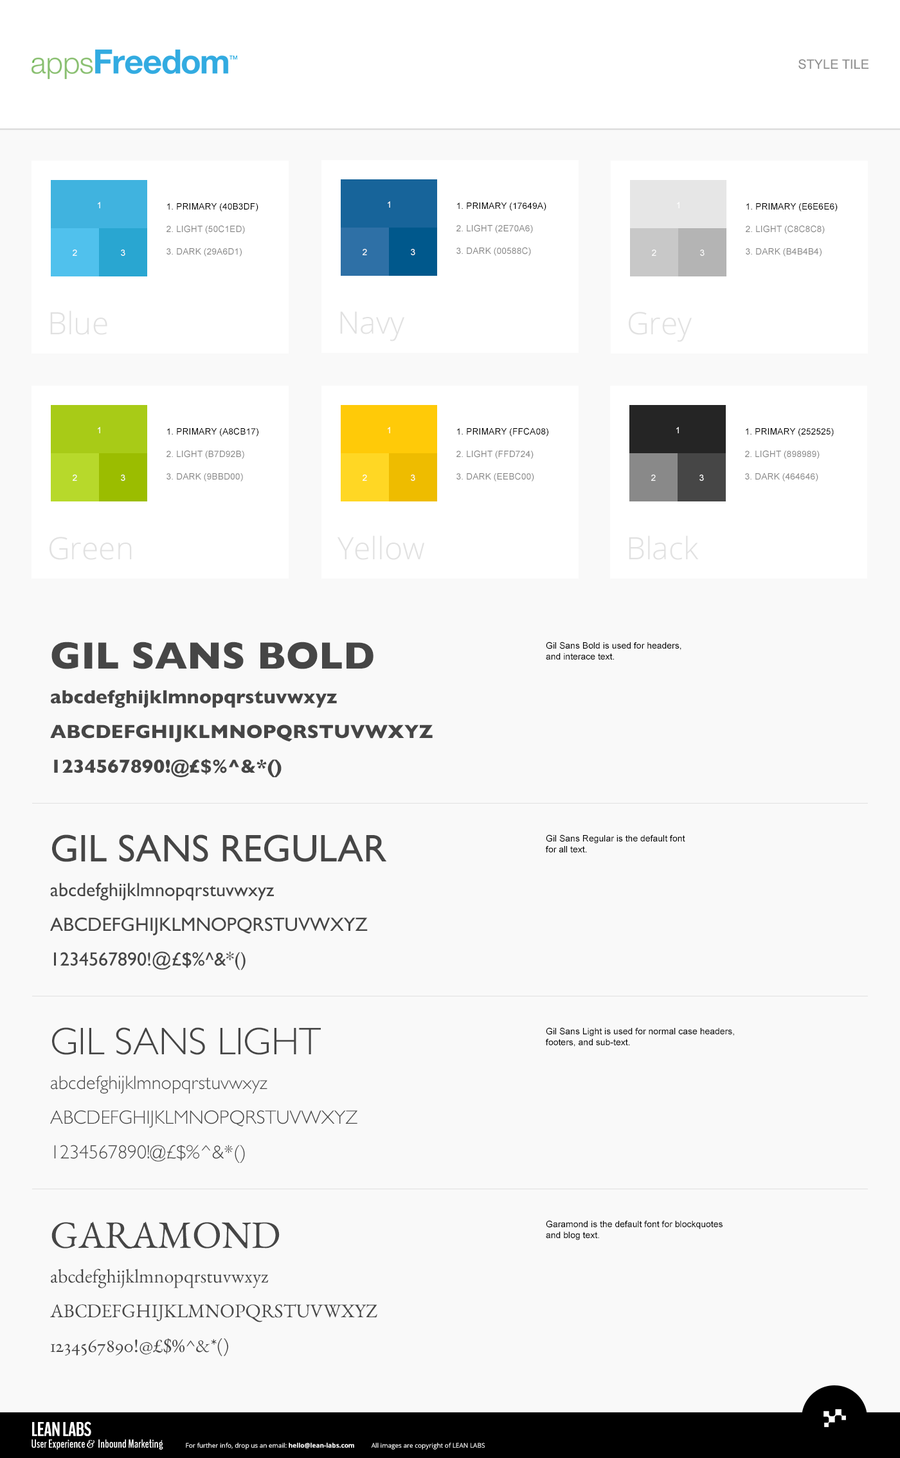
<style>
.page{position:relative;width:900px;height:1458px;background:#f9f9f9}
.page>*{position:absolute;margin:0}
.t1{font:12.9px "ArialMT";color:#8d8d8d;text-transform:uppercase}
.t2{font:9px "ArialMT";color:#ffffff;text-transform:uppercase}
.t3{font:9px "ArialMT";color:#898989;text-transform:uppercase}
.t4{font:9px "ArialMT";color:#000000;text-transform:uppercase}
.t5{font:30.9px "OpenSans-Light";color:#e1e1e1}
.t6{font:19.3px "GillSans-Bold";color:#464646;text-transform:uppercase}
.t7{font:38.6px "GillSans-Bold";color:#464646;text-transform:uppercase}
.t8{font:19.3px "GillSans-Bold";color:#464646}
.t9{font:9px "ArialMT";color:#000000}
.t10{font:19.3px "GillSans";color:#464646;text-transform:uppercase}
.t11{font:38.6px "GillSans";color:#464646;text-transform:uppercase}
.t12{font:19.3px "GillSans";color:#464646}
.t13{font:19.3px "GillSans-Light";color:#464646;text-transform:uppercase}
.t14{font:38.6px "GillSans-Light";color:#464646;text-transform:uppercase}
.t15{font:19.3px "GillSans-Light";color:#464646}
.t16{font:19.3px "EBGaramond";color:#464646;text-transform:uppercase}
.t17{font:38.6px "EBGaramond";color:#464646;text-transform:uppercase}
.t18{font:19.3px "EBGaramond";color:#464646}
.t19{font:19.3px "BenchNine-Bold";letter-spacing:-0.04em;color:#ffffff;text-transform:uppercase;font-weight:bold}
.t20{font:11.6px "BenchNine-Bold";color:#ffffff}
.t21{font:11.6px "Ovo";color:#ffffff}
.t22{font:6.4px "OpenSans";color:#ffffff}
.t23{font:6.4px "OpenSans-Bold";color:#ffffff}
</style>
<div class="page">
<p class="t1" style="left:798px;top:59px;width:71px;height:10px">STYLE TILE</p>
<p class="t2" style="left:98px;top:202px;width:2px;height:6px">1</p>
<p class="t3" style="left:166px;top:203px;width:92px;height:53px"><span class="t4">1. primary (40b3df)<br></span>2. light (50c1ed)<br>3. dark (29a6d1)</p>
<p class="t2" style="left:388px;top:201px;width:2px;height:7px">1</p>
<p class="t3" style="left:456px;top:203px;width:90px;height:53px"><span class="t4">1. primary (17649a)<br></span>2. light (2e70a6)<br>3. dark (00588c)</p>
<p class="t2" style="left:677px;top:202px;width:3px;height:6px">1</p>
<p class="t3" style="left:746px;top:203px;width:92px;height:53px"><span class="t4">1. primary (e6e6e6)<br></span>2. light (c8c8c8)<br>3. dark (b4b4b4)</p>
<p class="t2" style="left:73px;top:249px;width:4px;height:7px">2</p>
<p class="t2" style="left:121px;top:249px;width:4px;height:7px">3</p>
<p class="t2" style="left:363px;top:249px;width:4px;height:6px">2</p>
<p class="t2" style="left:411px;top:249px;width:4px;height:6px">3</p>
<p class="t2" style="left:652px;top:249px;width:4px;height:7px">2</p>
<p class="t2" style="left:700px;top:249px;width:5px;height:7px">3</p>
<p class="t5" style="left:50px;top:310px;width:57px;height:25px">Blue</p>
<p class="t5" style="left:340px;top:311px;width:64px;height:30px">Navy</p>
<p class="t5" style="left:629px;top:312px;width:63px;height:30px">Grey</p>
<p class="t2" style="left:98px;top:427px;width:2px;height:6px">1</p>
<p class="t3" style="left:166px;top:428px;width:92px;height:54px"><span class="t4">1. primary (a8cb17)<br></span>2. light (b7d92b)<br>3. dark (9bbd00)</p>
<p class="t2" style="left:388px;top:427px;width:2px;height:6px">1</p>
<p class="t3" style="left:456px;top:428px;width:92px;height:54px"><span class="t4">1. primary (ffca08)<br></span>2. light (ffd724)<br>3. dark (eebc00)</p>
<p class="t2" style="left:676px;top:427px;width:3px;height:6px">1</p>
<p class="t3" style="left:745px;top:428px;width:89px;height:54px"><span class="t4">1. primary (252525)<br></span>2. light (898989)<br>3. dark (464646)</p>
<p class="t2" style="left:73px;top:474px;width:4px;height:7px">2</p>
<p class="t2" style="left:121px;top:474px;width:4px;height:7px">3</p>
<p class="t2" style="left:363px;top:474px;width:4px;height:7px">2</p>
<p class="t2" style="left:411px;top:474px;width:4px;height:7px">3</p>
<p class="t2" style="left:651px;top:474px;width:5px;height:7px">2</p>
<p class="t2" style="left:699px;top:474px;width:5px;height:7px">3</p>
<p class="t5" style="left:50px;top:537px;width:82px;height:23px">Green</p>
<p class="t5" style="left:338px;top:536px;width:86px;height:24px">Yellow</p>
<p class="t5" style="left:629px;top:536px;width:70px;height:24px">Black</p>
<p class="t6" style="left:50px;top:642px;width:383px;height:135px"><span class="t7">Gil sans bold<br></span><span class="t8">abcdefghijklmnopqrstuvwxyz<br></span>abcdefghijklmnopqrstuvwxyz<br>1234567890!@£$%^&amp;*()</p>
<p class="t9" style="left:546px;top:642px;width:135px;height:18px">Gil Sans Bold is used for headers, <br>and interace text.</p>
<p class="t10" style="left:50px;top:834px;width:337px;height:136px"><span class="t11">Gil sans Regular<br></span><span class="t12">abcdefghijklmnopqrstuvwxyz<br></span>abcdefghijklmnopqrstuvwxyz<br>1234567890!@£$%^&amp;*()</p>
<p class="t9" style="left:546px;top:834px;width:139px;height:18px">Gil Sans Regular is the default font <br>for all text.</p>
<p class="t13" style="left:50px;top:1027px;width:307px;height:136px"><span class="t14">Gil sans Light<br></span><span class="t15">abcdefghijklmnopqrstuvwxyz<br></span>abcdefghijklmnopqrstuvwxyz<br>1234567890!@£$%^&amp;*()</p>
<p class="t9" style="left:546px;top:1027px;width:188px;height:20px">Gil Sans Light is used for normal case headers, footers, and sub-text.</p>
<p class="t16" style="left:50px;top:1221px;width:327px;height:135px"><span class="t17">Garamond<br></span><span class="t18">abcdefghijklmnopqrstuvwxyz<br></span>abcdefghijklmnopqrstuvwxyz<br>1234567890!@£$%^&amp;*()</p>
<p class="t9" style="left:546px;top:1220px;width:177px;height:20px">Garamond is the default font for blockquotes and blog text.</p>
<p class="t19" style="left:32px;top:1421px;width:59px;height:15px">Lean Labs</p>
<p class="t20" style="left:32px;top:1439px;width:131px;height:11px">User Experience <span class="t21">&amp; </span>Inbound Marketing</p>
<p class="t22" style="left:186px;top:1443px;width:299px;height:7px">For further info, drop us an email: <span class="t23">hello@lean-labs.com</span>          All images are copyright of LEAN LABS</p>
</div>
